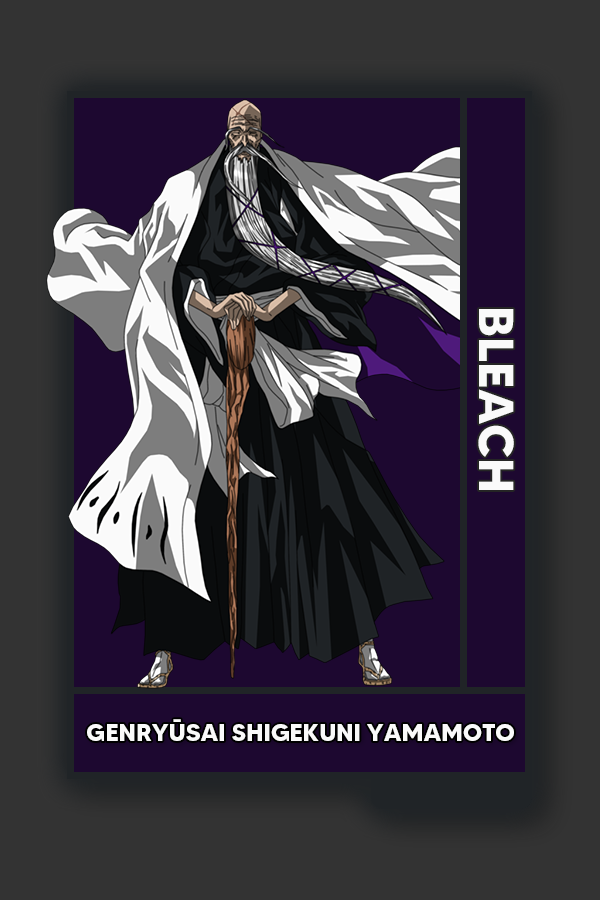
<style>
.page{position:relative;width:600px;height:900px;background:#333333}
.page>*{position:absolute;margin:0}
.t1{font:48.8px "MADETOMMY-Bold";color:#fafafa}
.t2{font:24.4px "MADETOMMY-Bold";color:#fafafa}
</style>
<div class="page">
<p class="t1" style="left:478px;top:309px;width:36px;height:181px;rotate:90deg">BLEACH</p>
<p class="t2" style="left:87px;top:719px;width:427px;height:22px">GENRYŪSAI SHIGEKUNI YAMAMOTO</p>
</div>
